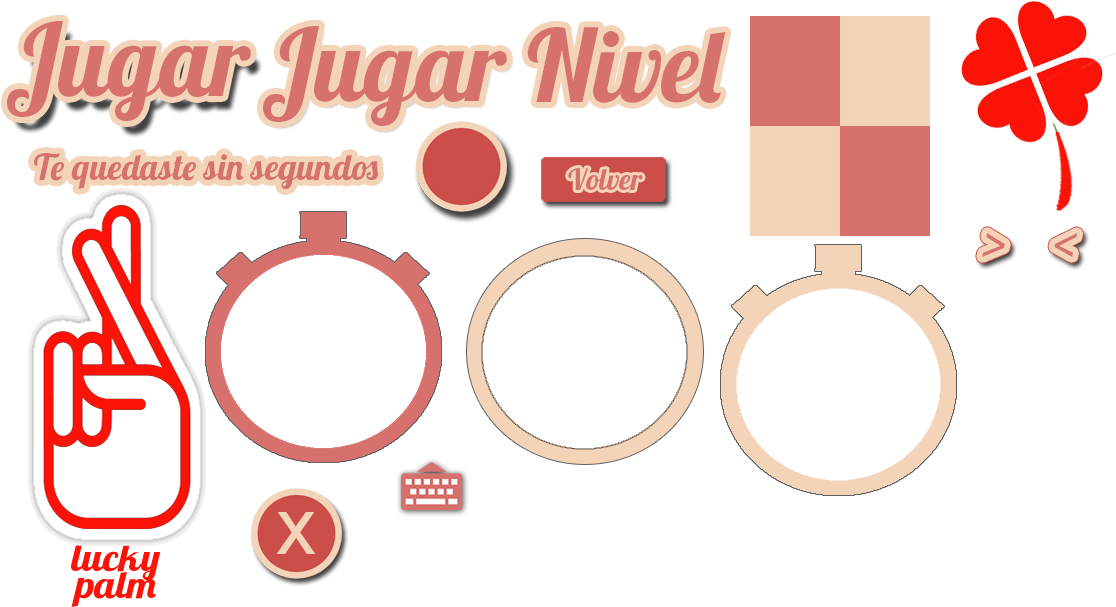
<style>
.page{position:relative;width:1116px;height:607px;background:#ffffff}
.page>*{position:absolute;margin:0}
.t1{font:100px "Lobster1.4";color:#d7716d}
.t2{font:36px "Lobster1.4";color:#d7716d}
.t3{font:29.5px "Lobster1.4";color:#d7716d}
.t4{font:37.8px/11.3px "Lobster1.4";color:#fc1308;scale:1.1 1}
</style>
<div class="page">
<p class="t1" style="left:7px;top:21px;width:244px;height:100px">Jugar</p>
<p class="t1" style="left:263px;top:26px;width:244px;height:100px">Jugar</p>
<p class="t1" style="left:527px;top:27px;width:199px;height:76px">Nivel</p>
<p class="t2" style="left:34px;top:153px;width:344px;height:36px">Te quedaste sin segundos</p>
<p class="t3" style="left:568px;top:168px;width:75px;height:22px">Volver</p>
<p class="t4" style="left:71px;top:545px;width:90px;height:62px;text-align:center">lucky<br>palm</p>
</div>
